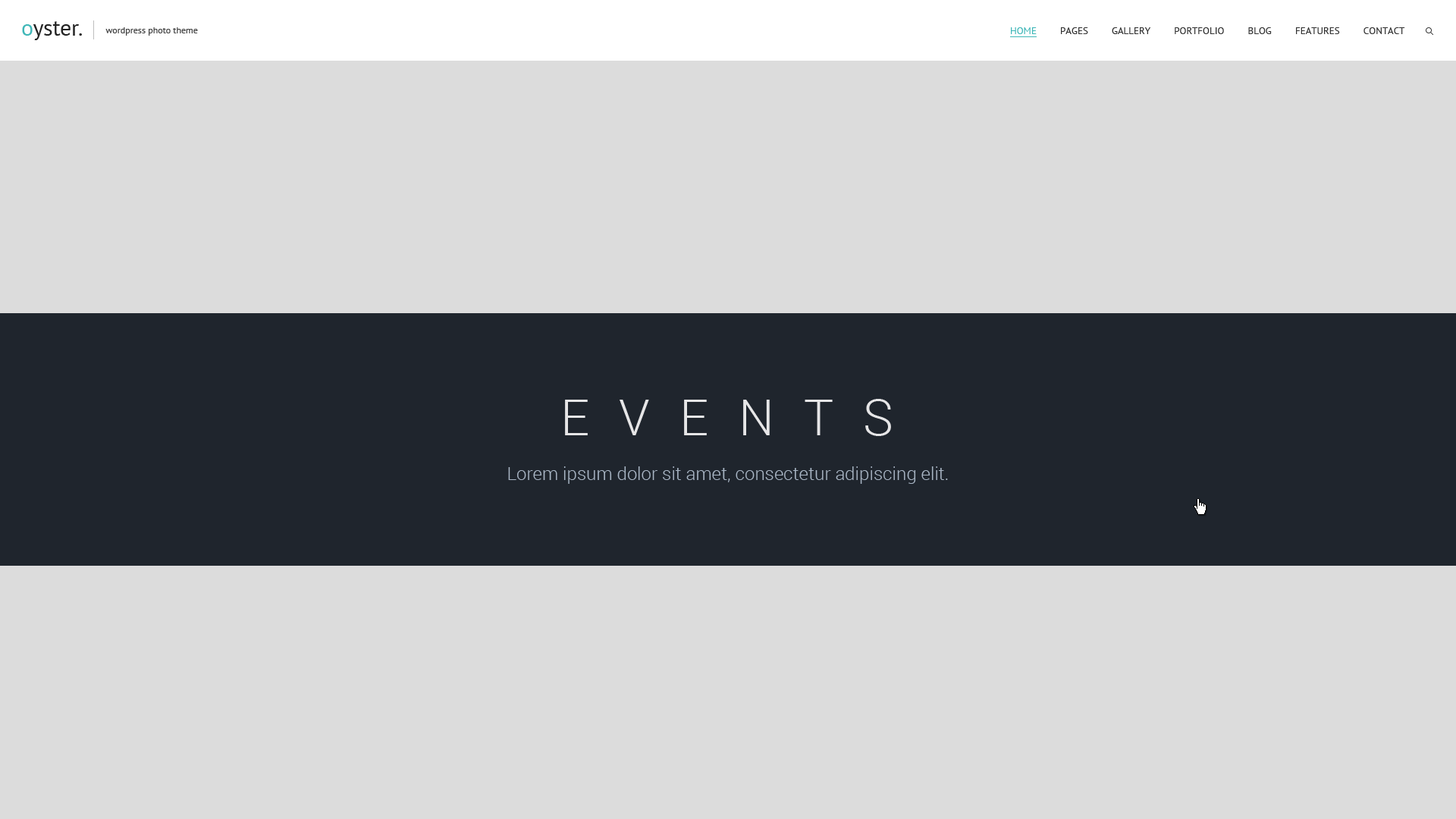
<style>
.page{position:relative;width:1456px;height:819px;background:#dcdcdc}
.page>*{position:absolute;margin:0}
.t1{font:9.1px "PTSans-Regular";color:#434343}
.t2{font:9.9px "PTSans-Regular";color:#343434;text-transform:uppercase}
.t3{font:9.9px "PTSans-Regular";color:#40b7b8;text-transform:uppercase}
.t4{font:50px "Roboto-Light";letter-spacing:0.6em;color:#e6e6e7;text-transform:uppercase}
.t5{font:18.2px "Roboto-Light";color:#a9b6c5}
</style>
<div class="page">
<p class="t1" style="left:105px;top:27px;width:93px;height:9px">wordpress photo theme</p>
<p class="t2" style="left:1011px;top:27px;width:394px;height:7px"><span class="t3">Home </span>        Pages         Gallery         Portfolio         Blog         Features         Contact</p>
<p class="t4" style="left:565px;top:399px;width:326px;height:37px">Events</p>
<p class="t5" style="left:508px;top:466px;width:440px;height:18px">Lorem ipsum dolor sit amet, consectetur adipiscing elit.</p>
</div>
